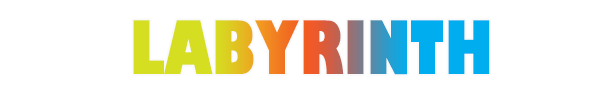
<style>
.page{position:relative;width:600px;height:96px;background:#ffffff}
.page>*{position:absolute;margin:0}
.t1{font:72px "GillSans-UltraBoldCondensed"}
</style>
<div class="page">
<p class="t1" style="left:133px;top:20px;width:357px;height:55px">LABYRINTH</p>
</div>
